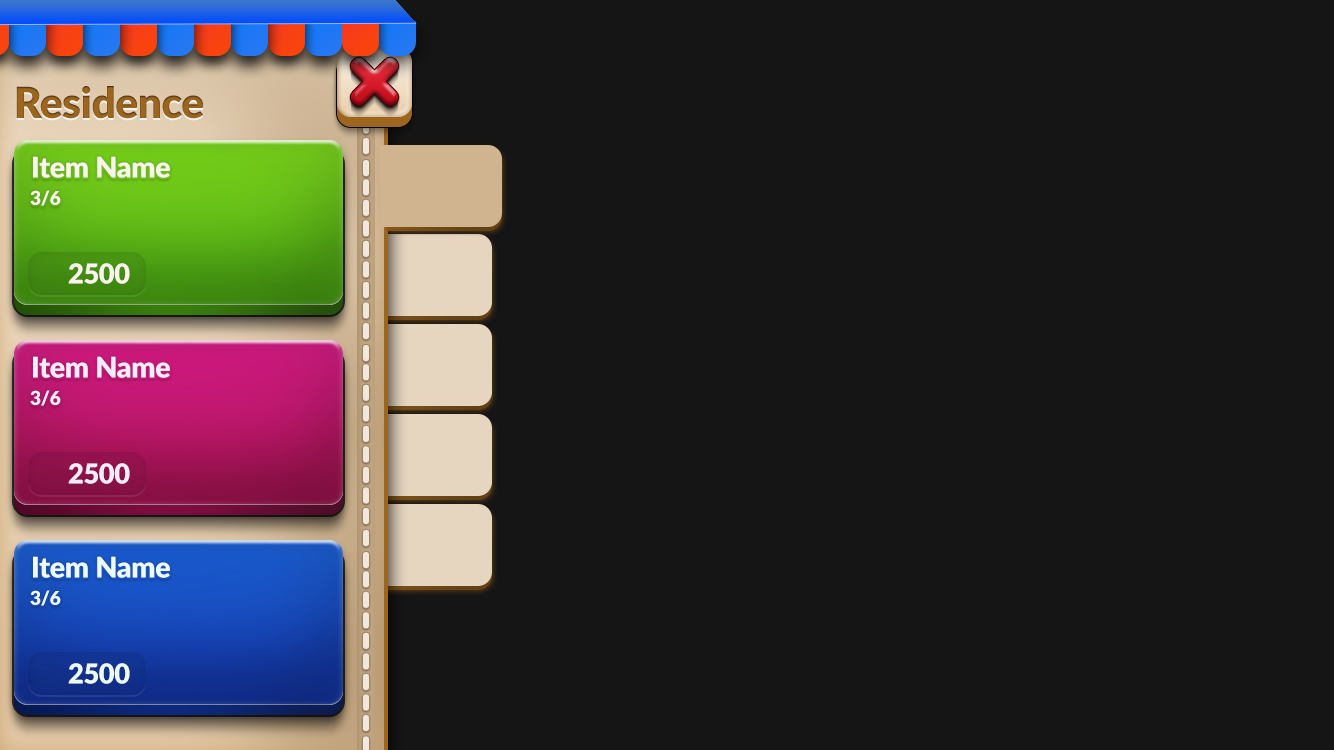
<style>
.page{position:relative;width:1334px;height:750px;background:#161515}
.page>*{position:absolute;margin:0}
.t1{font:42.4px "Lato-Black";letter-spacing:-0.01em;color:#9c661e}
.t2{font:28.6px "Lato-Black";letter-spacing:-0.01em;color:#fbf4ec}
.t3{font:19px "Lato-Black";letter-spacing:-0.01em;color:#fbf4ec}
.t4{font:27.2px "Lato-Black";letter-spacing:-0.01em;color:#fbf4ec}
</style>
<div class="page">
<p class="t1" style="left:16px;top:86px;width:187px;height:33px">Residence</p>
<p class="t2" style="left:33px;top:156px;width:137px;height:22px">Item Name</p>
<p class="t3" style="left:30px;top:190px;width:31px;height:16px">3/6</p>
<p class="t4" style="left:68px;top:263px;width:62px;height:21px">2500</p>
<p class="t2" style="left:33px;top:356px;width:137px;height:22px">Item Name</p>
<p class="t3" style="left:30px;top:390px;width:31px;height:16px">3/6</p>
<p class="t4" style="left:68px;top:463px;width:62px;height:21px">2500</p>
<p class="t2" style="left:33px;top:556px;width:137px;height:22px">Item Name</p>
<p class="t3" style="left:30px;top:590px;width:31px;height:16px">3/6</p>
<p class="t4" style="left:68px;top:663px;width:62px;height:21px">2500</p>
</div>
